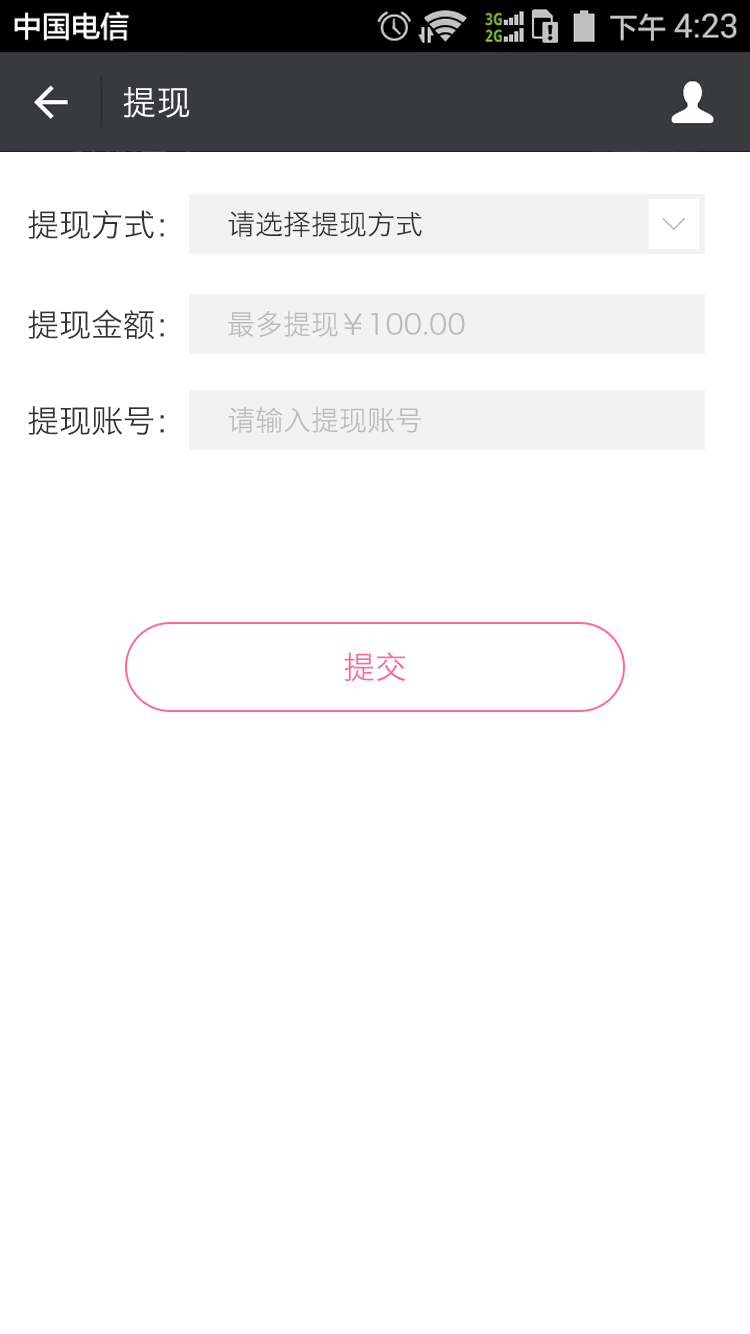
<style>
.page{position:relative;width:750px;height:1334px;background:#ffffff}
.page>*{position:absolute;margin:0}
.t1{font:34px "HiraginoSansGB-W3";letter-spacing:0.022em;color:#ffffff}
.t2{font:32px "HiraginoSansGB-W3";color:#333333}
.t3{font:28px "HiraginoSansGB-W3";color:#333333}
.t4{font:32px "SimSun";color:#bbbbbb;font-weight:bold}
.t5{font:28px "HiraginoSansGB-W3";color:#bbbbbb}
.t6{font:32px "HiraginoSansGB-W3";color:#ff6699}
</style>
<div class="page">
<p class="t1" style="left:123px;top:87px;width:67px;height:31px">提现</p>
<p class="t2" style="left:28px;top:210px;width:136px;height:29px">提现方式：</p>
<p class="t3" style="left:228px;top:211px;width:194px;height:26px">请选择提现方式</p>
<p class="t4" style="left:662px;top:217px;width:23px;height:14px;rotate:90deg">&gt;</p>
<p class="t2" style="left:28px;top:309px;width:136px;height:31px">提现金额：</p>
<p class="t5" style="left:228px;top:311px;width:237px;height:26px">最多提现￥100.00</p>
<p class="t2" style="left:28px;top:406px;width:136px;height:30px">提现账号：</p>
<p class="t5" style="left:228px;top:407px;width:194px;height:26px">请输入提现账号</p>
<p class="t6" style="left:344px;top:652px;width:62px;height:30px">提交</p>
</div>
